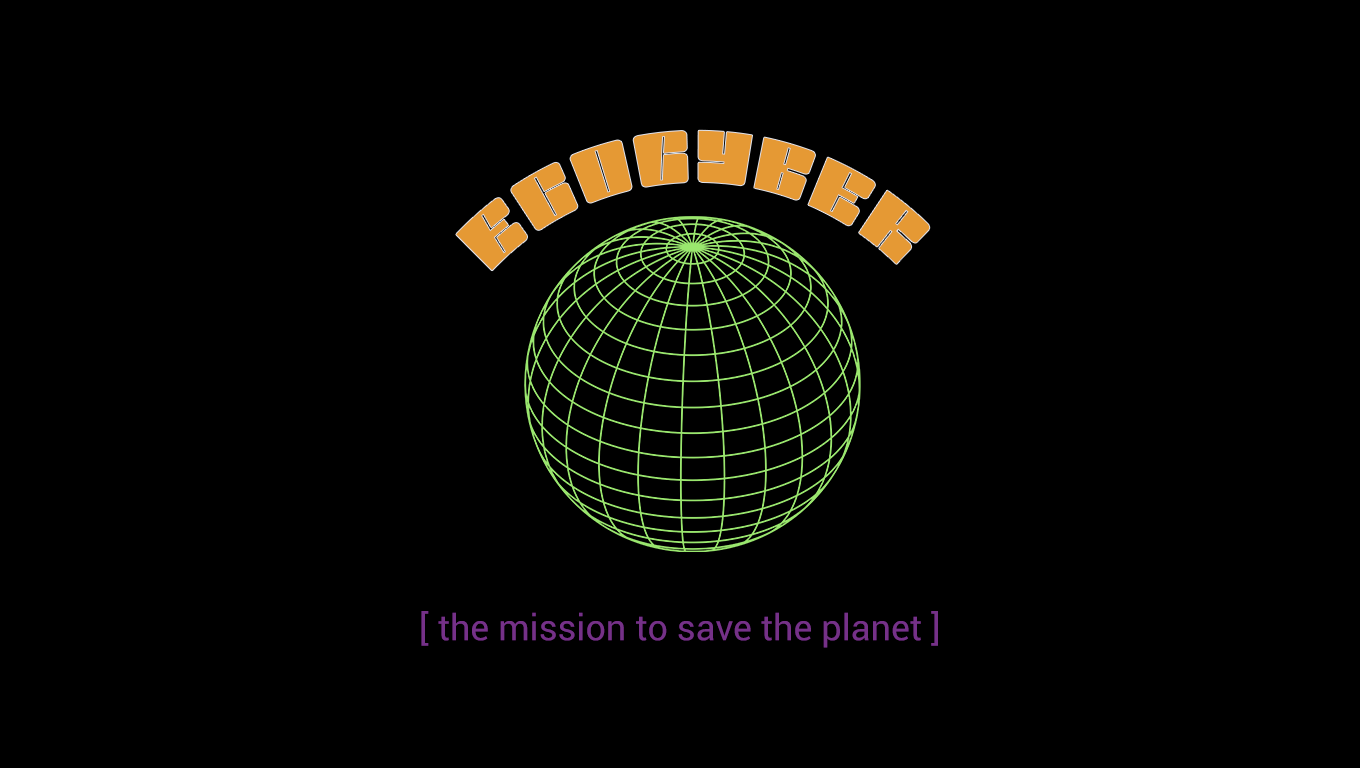
<style>
.page{position:relative;width:1360px;height:768px;background:#000000}
.page>*{position:absolute;margin:0}
.t1{font:73.7px "ModernTechno-DemoVersion-Regular";letter-spacing:0.1em;color:#e59934}
.t2{font:36px "Roboto-Regular";color:#753188}
</style>
<div class="page">
<p class="t1" style="left:456px;top:130px;width:474px;height:141px;text-align:center">EcoCyber</p>
<p class="t2" style="left:421px;top:611px;width:517px;height:37px">[ the mission to save the planet ]</p>
</div>
